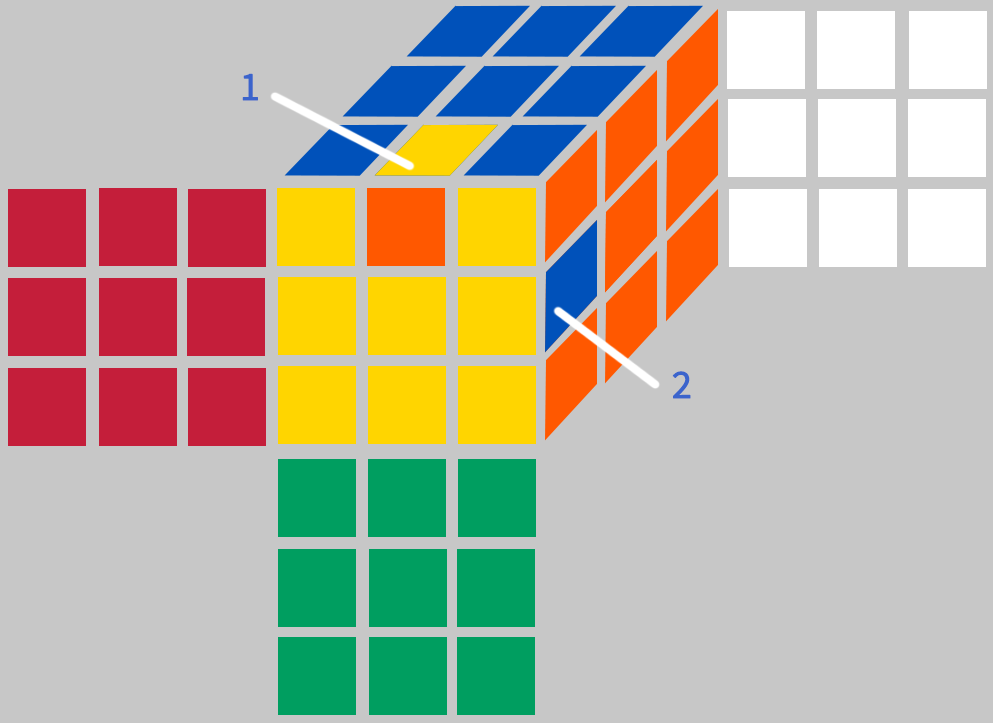
<style>
.page{position:relative;width:993px;height:723px;background:#c7c7c7}
.page>*{position:absolute;margin:0}
.t1{font:36px "SourceHanSansCN-Normal";color:#3b64cc;font-weight:bold}
</style>
<div class="page">
<p class="t1" style="left:242px;top:73px;width:16px;height:28px">1</p>
<p class="t1" style="left:672px;top:371px;width:19px;height:28px">2</p>
</div>
